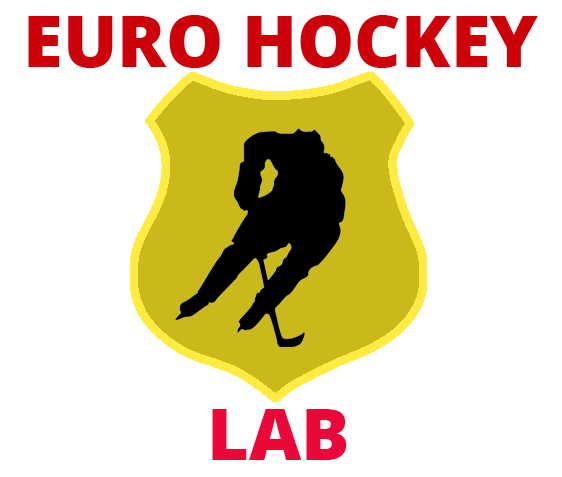
<style>
.page{position:relative;width:562px;height:477px;background:#ffffff}
.page>*{position:absolute;margin:0}
.t1{font:72px "OpenSans-ExtraBold";color:#cd010a}
.t2{font:72px "OpenSans-ExtraBold";color:#e90838}
</style>
<div class="page">
<p class="t1" style="left:28px;top:15px;width:510px;height:53px">EURO HOCKEY</p>
<p class="t2" style="left:212px;top:409px;width:135px;height:51px">LAB</p>
</div>
